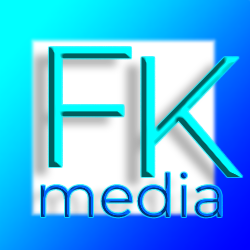
<style>
.page{position:relative;width:250px;height:250px}
.page>*{position:absolute;margin:0}
.t1{font:171px "Montserrat-Regular"}
.t2{font:60px "Montserrat-Regular"}
</style>
<div class="page">
<p class="t1" style="left:48px;top:47px;width:84px;height:120px">F</p>
<p class="t1" style="left:141px;top:57px;width:102px;height:120px">K</p>
<p class="t2" style="left:40px;top:172px;width:182px;height:46px">media</p>
</div>
